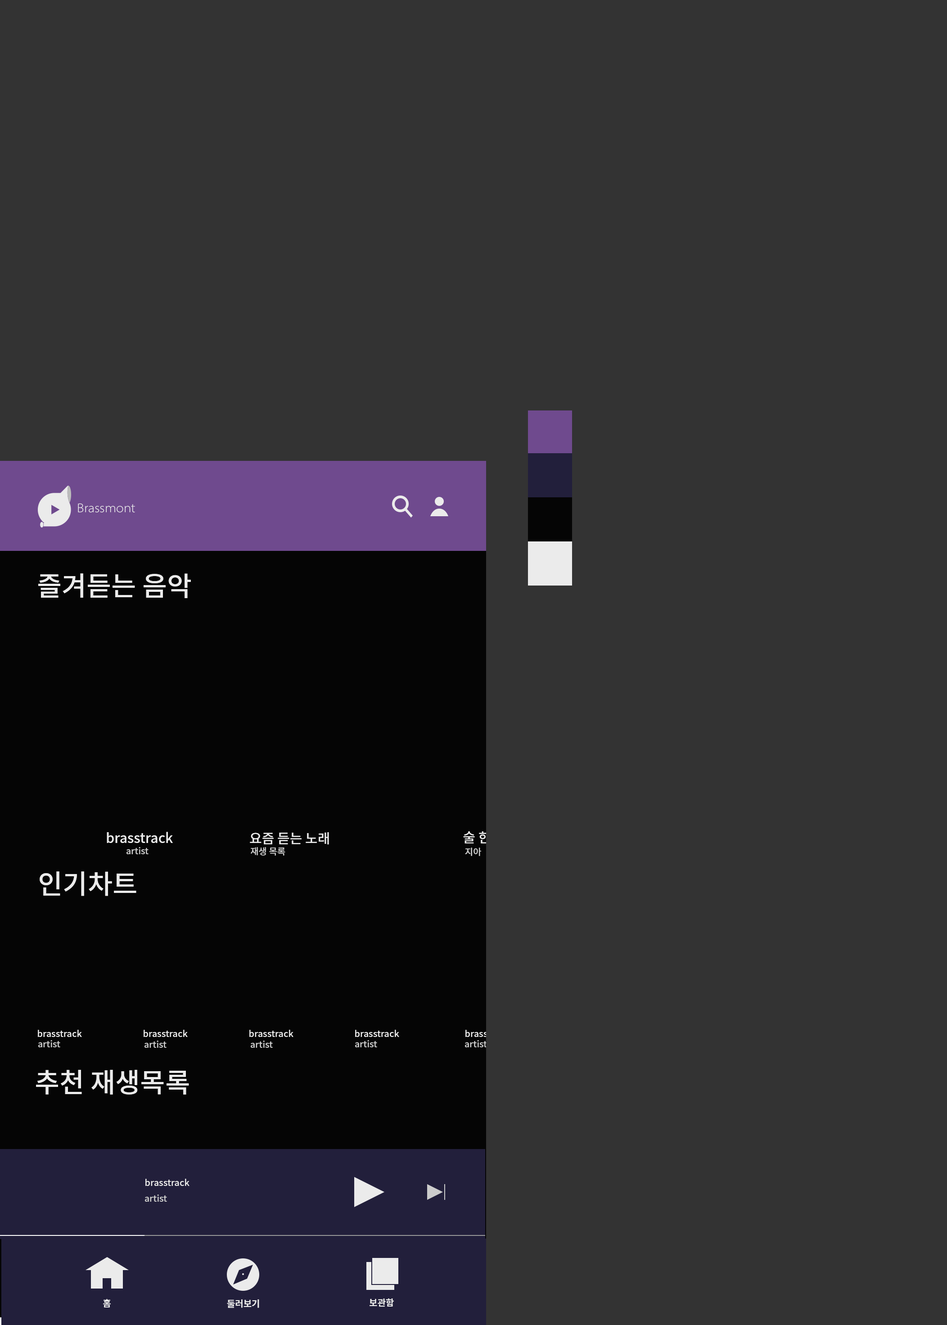
<style>
.page{position:relative;width:947px;height:1325px;background:#333333}
.page>*{position:absolute;margin:0}
.t1{font:27px "NotoSansKR-Medium";color:#ebebeb}
.t2{font:13.5px "NotoSansKR-Medium";color:#ebebeb}
.t3{font:13.5px "NotoSansKR-Medium"}
.t4{font:9px "NotoSansKR-Medium";color:#cccccc}
.t5{font:9px "NotoSansKR-Medium";color:#ebebeb}
.t6{font:9px "NotoSansKR-Medium"}
.t7{font:9px "NotoSansKR-Bold";color:#ebebeb}
</style>
<div class="page">
<p class="t1" style="left:38px;top:573px;width:153px;height:25px">즐겨듣는 음악</p>
<p class="t2" style="left:107px;top:832px;width:66px;height:11px">brasstrack</p>
<p class="t2" style="left:250px;top:832px;width:79px;height:13px">요즘 듣는 노래</p>
<p class="t3" style="left:463px;top:831px;width:40px;height:12px">술 한잔</p>
<p class="t4" style="left:126px;top:847px;width:22px;height:7px">artist</p>
<p class="t4" style="left:251px;top:847px;width:34px;height:8px">재생 목록</p>
<p class="t4" style="left:465px;top:847px;width:16px;height:9px">지아</p>
<p class="t1" style="left:40px;top:871px;width:96px;height:25px">인기차트</p>
<p class="t5" style="left:38px;top:1030px;width:44px;height:7px">brasstrack</p>
<p class="t5" style="left:144px;top:1030px;width:44px;height:7px">brasstrack</p>
<p class="t5" style="left:249px;top:1030px;width:44px;height:7px">brasstrack</p>
<p class="t5" style="left:355px;top:1030px;width:44px;height:7px">brasstrack</p>
<p class="t6" style="left:465px;top:1030px;width:44px;height:7px">brasstrack</p>
<p class="t4" style="left:38px;top:1040px;width:22px;height:7px">artist</p>
<p class="t4" style="left:144px;top:1040px;width:22px;height:8px">artist</p>
<p class="t4" style="left:251px;top:1040px;width:22px;height:8px">artist</p>
<p class="t4" style="left:355px;top:1040px;width:22px;height:7px">artist</p>
<p class="t4" style="left:465px;top:1040px;width:22px;height:7px">artist</p>
<p class="t1" style="left:36px;top:1070px;width:153px;height:24px">추천 재생목록</p>
<p class="t5" style="left:145px;top:1179px;width:44px;height:7px">brasstrack</p>
<p class="t4" style="left:145px;top:1194px;width:22px;height:7px">artist</p>
<p class="t7" style="left:103px;top:1299px;width:8px;height:8px">홈</p>
<p class="t7" style="left:227px;top:1299px;width:32px;height:9px">둘러보기</p>
<p class="t7" style="left:369px;top:1298px;width:25px;height:9px">보관함</p>
</div>
